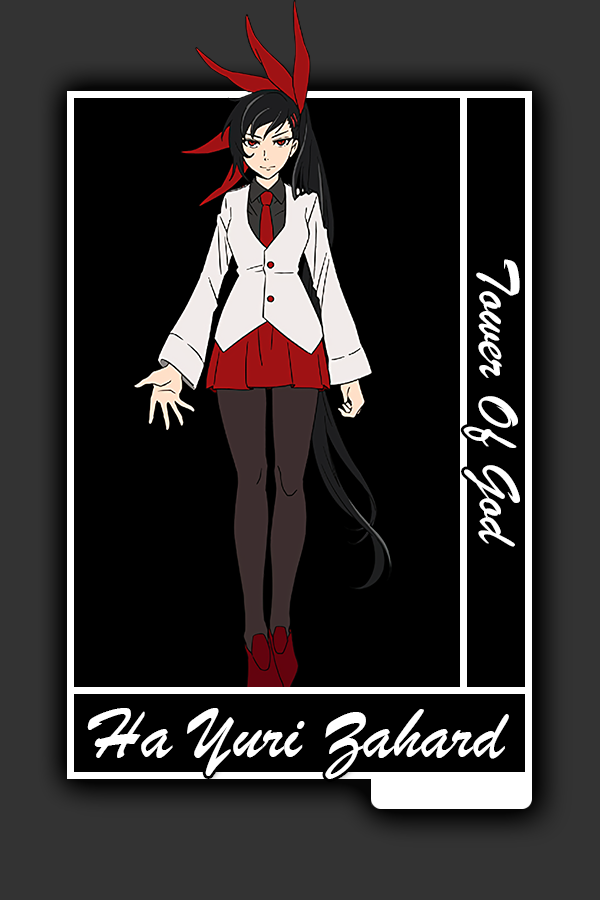
<style>
.page{position:relative;width:600px;height:900px;background:#000000}
.page>*{position:absolute;margin:0}
.t1{font:61.5px "BrushScriptMT";color:#ffffff}
.t2{font:75px "BrushScriptMT";color:#ffffff}
</style>
<div class="page">
<p class="t1" style="left:463px;top:259px;width:57px;height:288px;rotate:90deg">Tower Of God</p>
<p class="t2" style="left:87px;top:708px;width:422px;height:71px">Ha Yuri Zahard</p>
</div>
